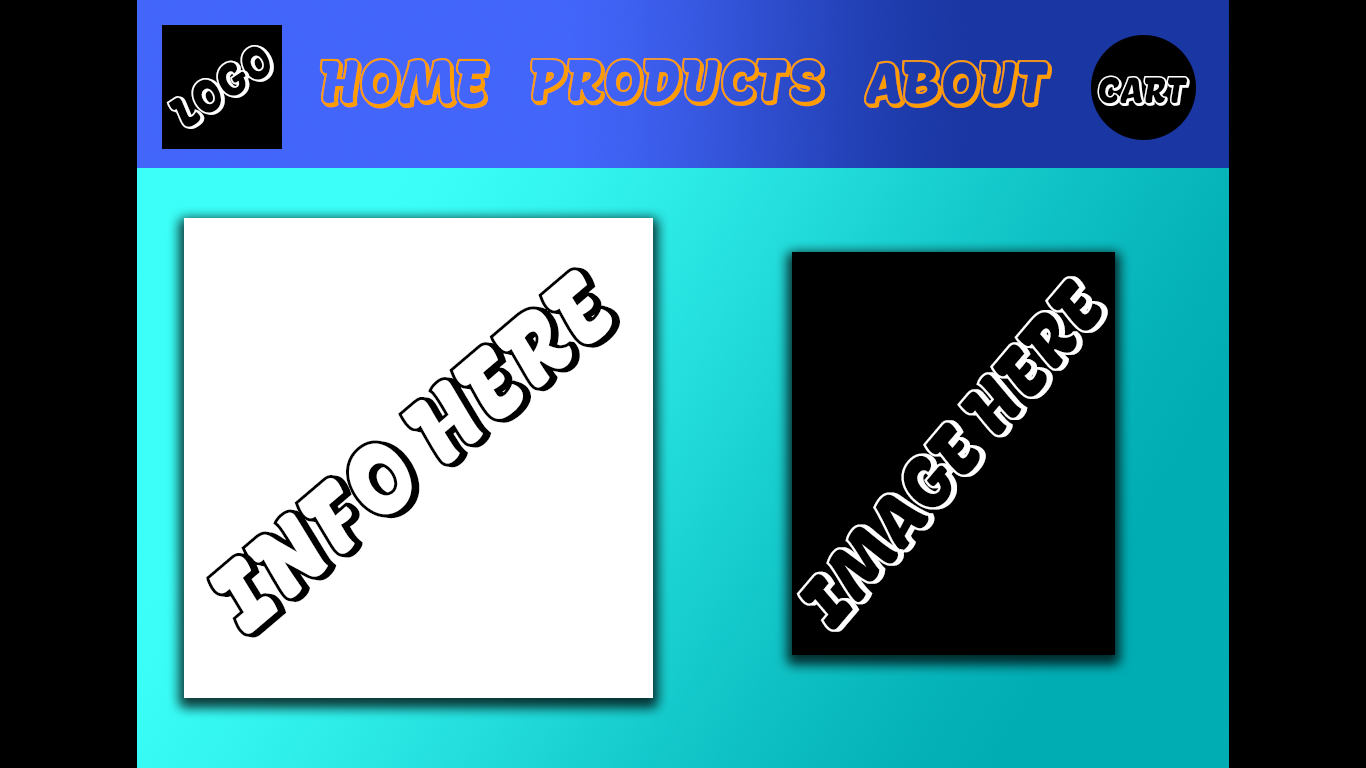
<style>
.page{position:relative;width:1366px;height:768px;background:#000000}
.page>*{position:absolute;margin:0}
.t1{font:46.3px "LaPicaDemo-LaPicaDemo";color:#ffffff}
.t2{font:61.3px "LaPicaDemo-LaPicaDemo";color:#ff9c00}
.t3{font:59px "LaPicaDemo-LaPicaDemo";color:#ff9c00}
.t4{font:37.4px "LaPicaDemo-LaPicaDemo";color:#ffffff}
.t5{font:100px "LaPicaDemo-LaPicaDemo";color:#000000}
.t6{font:73.7px "LaPicaDemo-LaPicaDemo";color:#ffffff}
</style>
<div class="page">
<p class="t1" style="left:166px;top:45px;width:108px;height:84px;rotate:-34deg">logo</p>
<p class="t2" style="left:319px;top:58px;width:172px;height:51px">Home</p>
<p class="t3" style="left:530px;top:58px;width:295px;height:49px">Products</p>
<p class="t3" style="left:864px;top:60px;width:188px;height:48px">About</p>
<p class="t4" style="left:1097px;top:75px;width:93px;height:31px">cart</p>
<p class="t5" style="left:206px;top:267px;width:414px;height:371px;rotate:-40deg">INFO HERE</p>
<p class="t6" style="left:796px;top:276px;width:312px;height:356px;rotate:-50deg">Image here</p>
</div>
